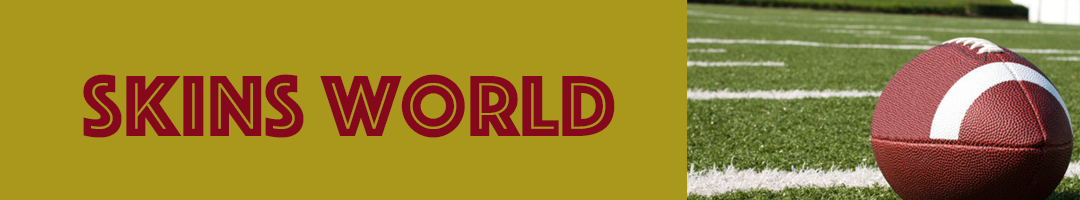
<style>
.page{position:relative;width:1080px;height:200px;background:#a9981b}
.page>*{position:absolute;margin:0}
.t1{font:90px "Phosphate-Inline";color:#85081d}
</style>
<div class="page">
<p class="t1" style="left:83px;top:74px;width:532px;height:64px">Skins World</p>
</div>
